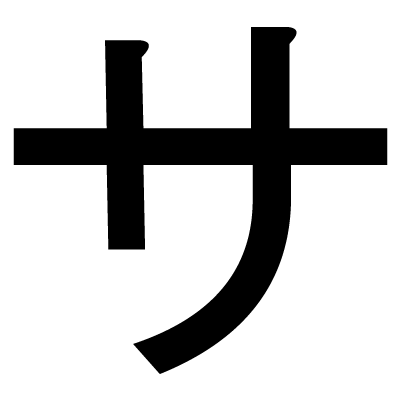
<style>
.page{position:relative;width:400px;height:400px;background:#ffffff}
.page>*{position:absolute;margin:0}
.t1{font:424.8px "MS-PGothic";color:#000000}
</style>
<div class="page">
<p class="t1" style="left:13px;top:27px;width:375px;height:347px">サ</p>
</div>
